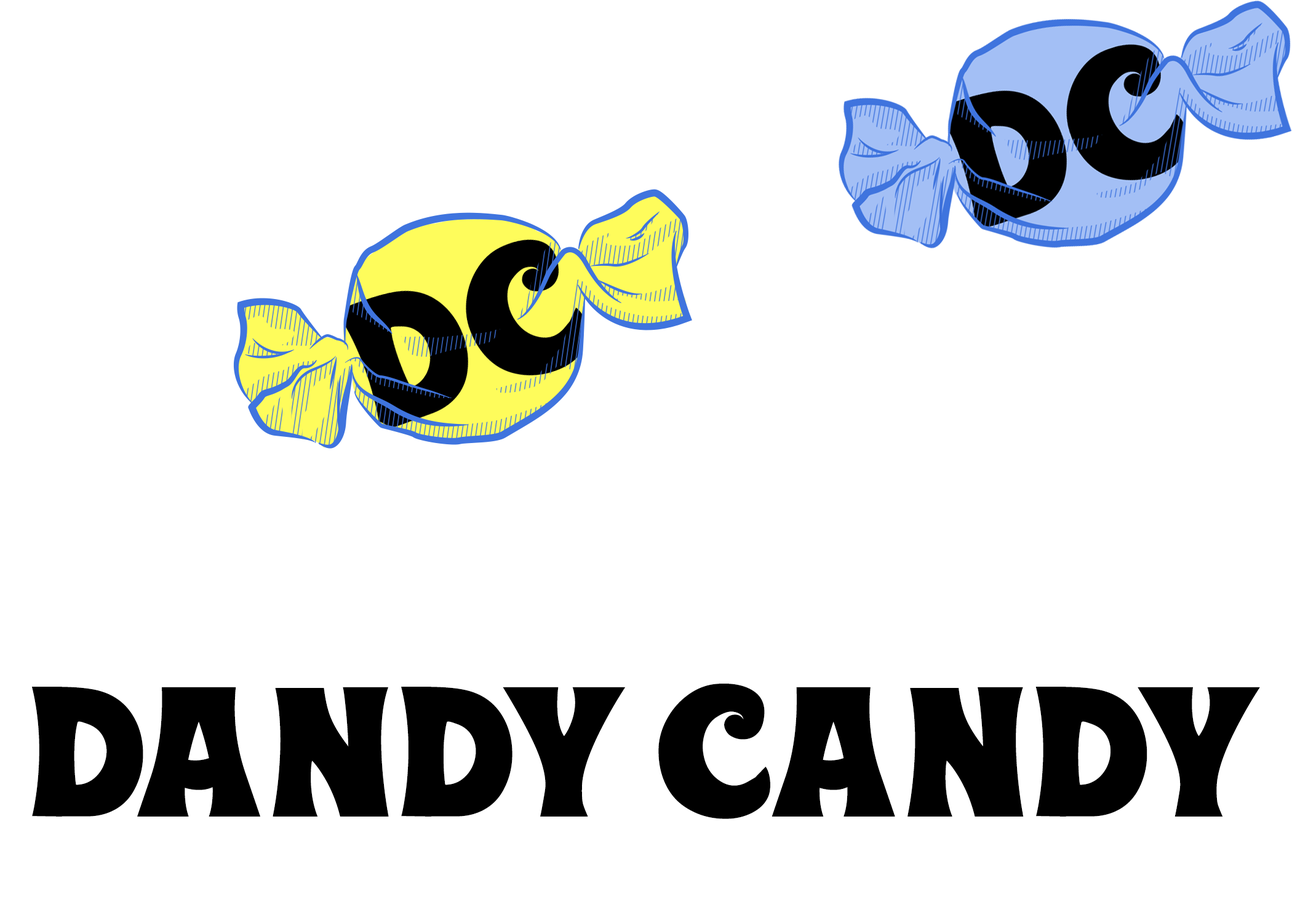
<style>
.page{position:relative;width:1292px;height:923px;background:#ffffff}
.page>*{position:absolute;margin:0}
.t1{font:179.5px "Wonderbar";color:#000000}
</style>
<div class="page">
<p class="t1" style="left:32px;top:684px;width:1228px;height:135px">Dandy Candy</p>
</div>
